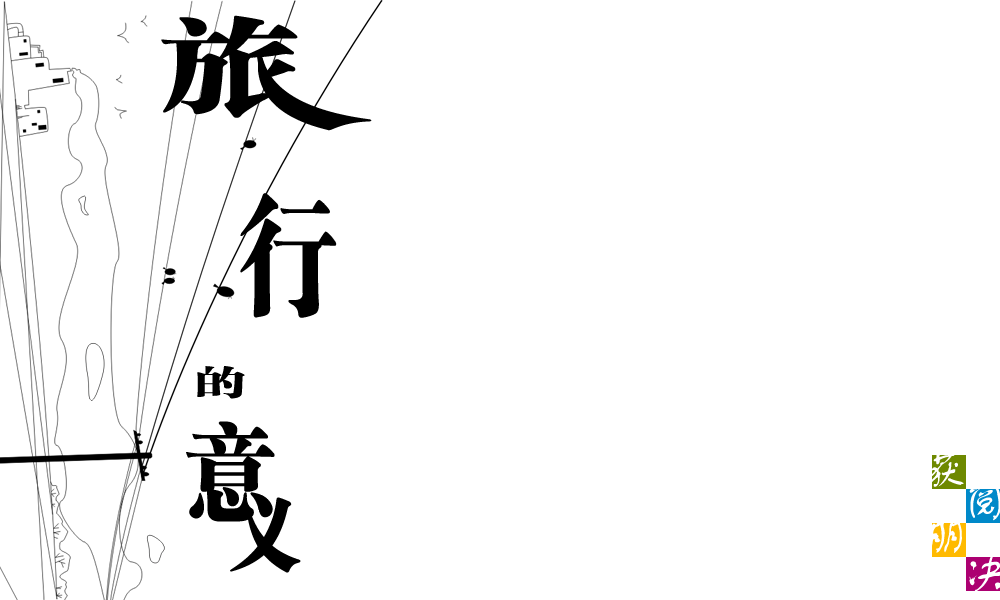
<style>
.page{position:relative;width:1000px;height:600px;background:#ffffff}
.page>*{position:absolute;margin:0}
.t1{font:126.8px "FZCSJW--GB1-0";letter-spacing:0.1em;color:#000000;scale:0.79 1}
.t2{font:33.5px "FZCSJW--GB1-0";letter-spacing:0.1em;color:#000000;scale:1.49 1}
.t3{font:102.4px "FZCSJW--GB1-0";letter-spacing:0.1em;color:#000000;scale:0.87 1}
.t4{font:84.5px "FZCSJW--GB1-0";letter-spacing:0.1em;color:#000000;scale:0.88 1}
</style>
<div class="page">
<p class="t1" style="left:240px;top:193px;width:97px;height:125px">行</p>
<p class="t2" style="left:197px;top:366px;width:48px;height:33px">的</p>
<p class="t3" style="left:186px;top:421px;width:89px;height:101px">意</p>
<p class="t4" style="left:230px;top:494px;width:71px;height:79px">义</p>
</div>
